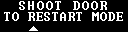
<style>
.page{position:relative;width:128px;height:32px;background:#000000}
.page>*{position:absolute;margin:0}
.t1{font:12.9px "Terminal";letter-spacing:0.075em;color:#ffffff}
.t2{font:12.9px "Terminal";color:#ffffff}
</style>
<div class="page">
<p class="t1" style="left:19px;top:1px;width:88px;height:9px">SHOOT DOOR</p>
<p class="t2" style="left:4px;top:12px;width:119px;height:9px">TO RESTART MODE</p>
</div>
